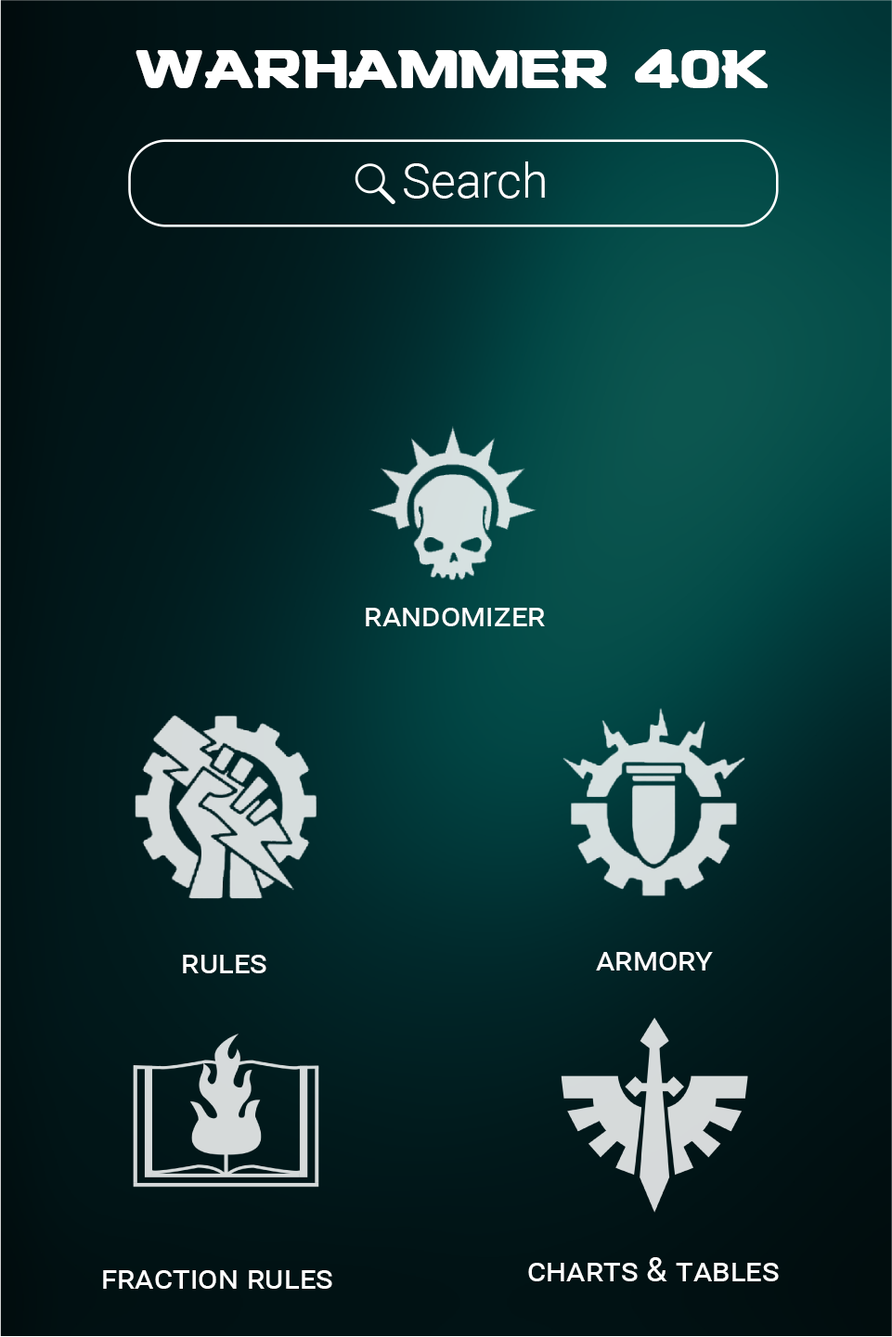
<style>
.page{position:relative;width:892px;height:1337px}
.page>*{position:absolute;margin:0}
.t1{font:50.9px "Denzel";color:#ffffff;font-weight:bold}
.t2{font:48px "Roboto-Light";color:#ffffff}
.t3{font:33.6px "Roboto-Regular";color:#ffffff;font-variant:small-caps}
</style>
<div class="page">
<p class="t1" style="left:135px;top:49px;width:632px;height:39px">Warhammer 40k</p>
<p class="t2" style="left:404px;top:161px;width:141px;height:38px">Search</p>
<p class="t3" style="left:366px;top:608px;width:179px;height:18px">randomizer</p>
<p class="t3" style="left:596px;top:952px;width:117px;height:19px">armory</p>
<p class="t3" style="left:183px;top:955px;width:83px;height:18px">rules</p>
<p class="t3" style="left:528px;top:1257px;width:251px;height:24px">charts &amp; tables</p>
<p class="t3" style="left:103px;top:1270px;width:229px;height:19px">fraction rules</p>
</div>
